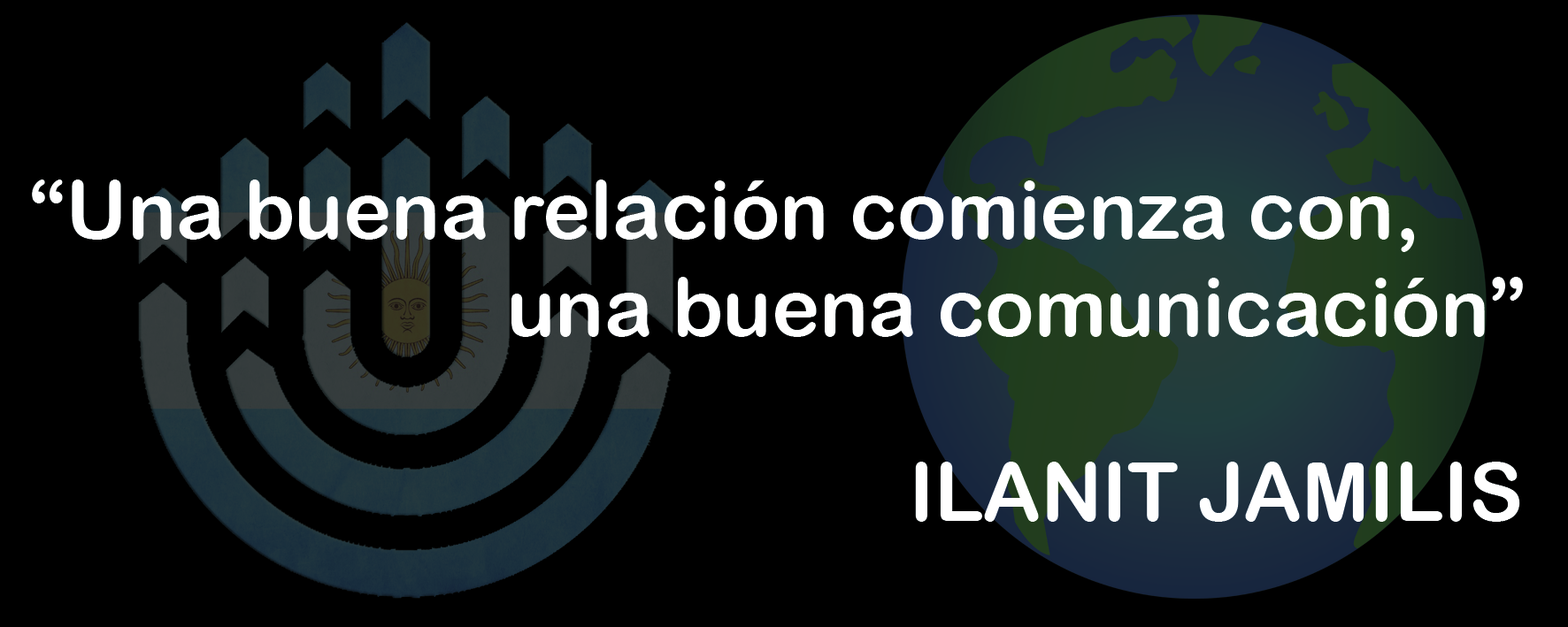
<style>
.page{position:relative;width:1568px;height:627px;background:#000000}
.page>*{position:absolute;margin:0}
.t1{font:81.1px "ArialRoundedMTBold";color:#ffffff}
</style>
<div class="page">
<p class="t1" style="left:32px;top:180px;width:1491px;height:157px">“Una buena relación comienza con,<br>               una buena comunicación”</p>
<p class="t1" style="left:915px;top:462px;width:605px;height:60px">ILANIT JAMILIS</p>
</div>
